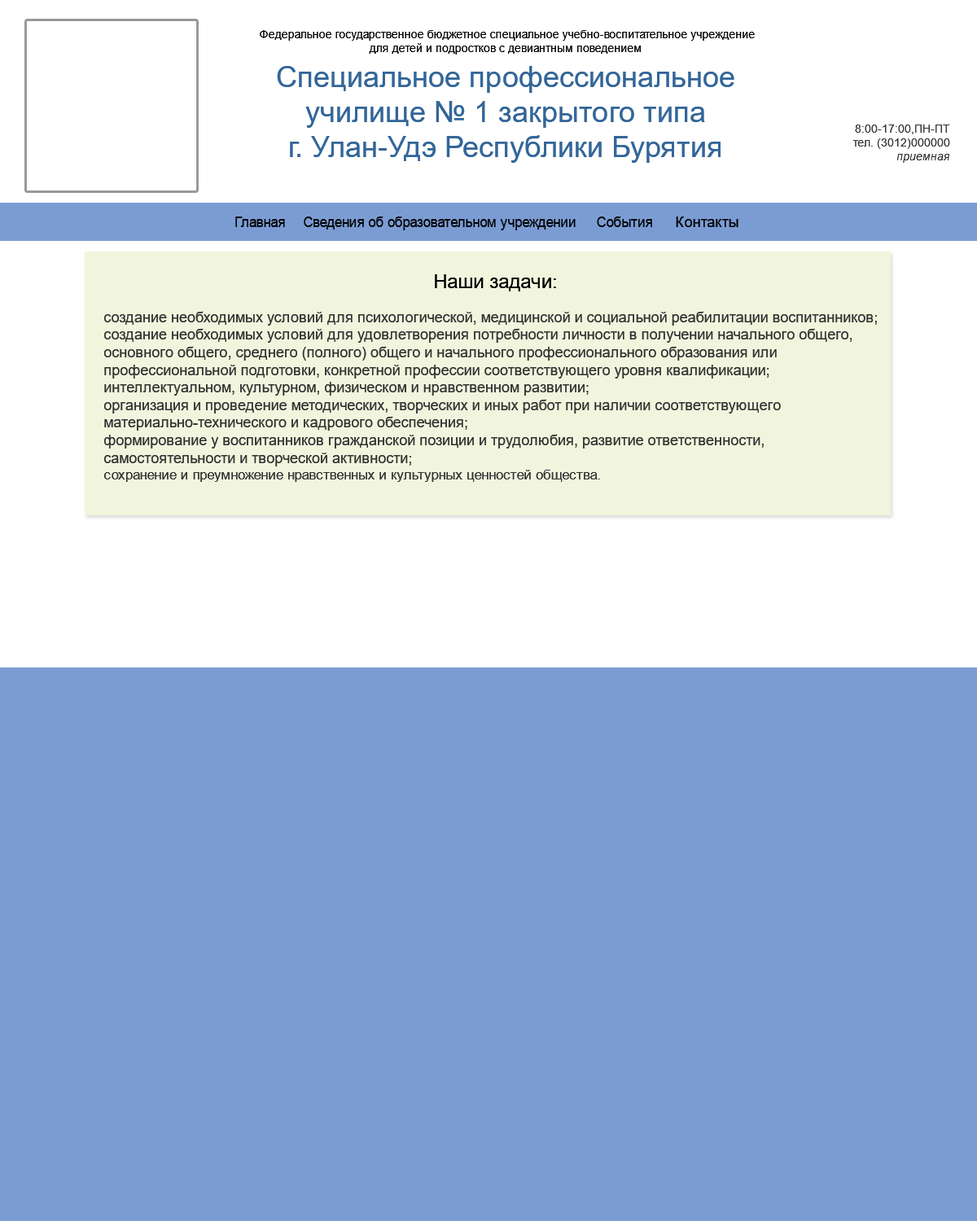
<style>
.page{position:relative;width:977px;height:1221px;background:#7b9cd3}
.page>*{position:absolute;margin:0}
.t1{font:11.4px "ArialMT";color:#000000}
.t2{font:29.3px "ArialMT";color:#336699}
.t3{font:11.4px "ArialMT";color:#333333}
.t4{font:11.4px "Arial-ItalicMT";color:#333333}
.t5{font:14.7px "ArialMT";color:#000000;scale:0.93 1}
.t6{font:14.7px "ArialMT";color:#000000}
.t7{font:14.7px "ArialMT";color:#333333}
.t8{font:13.6px "ArialMT";color:#000000}
.t9{font:19.5px "ArialMT";color:#000000}
.t10{font:13.6px "ArialMT";color:#333333}
</style>
<div class="page">
<p class="t1" style="left:260px;top:30px;width:495px;height:25px;text-align:center">Федеральное государственное бюджетное специальное учебно-воспитательное учреждение для детей и подростков с девиантным поведением</p>
<p class="t2" style="left:277px;top:66px;width:457px;height:97px;text-align:center">Специальное профессиональное училище № 1 закрытого типа<br>г. Улан-Удэ Республики Бурятия</p>
<p class="t3" style="left:852px;top:125px;width:98px;height:38px;text-align:right">8:00-17:00,ПН-ПТ<br>тел. (3012)000000<br><span class="t4">приемная</span></p>
<p class="t5" style="left:235px;top:217px;width:50px;height:10px">Главная</p>
<p class="t5" style="left:304px;top:217px;width:271px;height:13px">Сведения об образовательном учреждении</p>
<p class="t5" style="left:597px;top:217px;width:55px;height:10px">События</p>
<p class="t6" style="left:676px;top:217px;width:62px;height:10px">Контакты</p>
<p class="t7" style="left:104px;top:274px;width:773px;height:208px;text-align:center"><span class="t8">  </span><span class="t9">Наши задачи:<br><br></span>создание необходимых условий для психологической, медицинской и социальной реабилитации воспитанников;<br>создание необходимых условий для удовлетворения потребности личности в получении начального общего, основного общего, среднего (полного) общего и начального профессионального образования или профессиональной подготовки, конкретной профессии соответствующего уровня квалификации; интеллектуальном, культурном, физическом и нравственном развитии;<br>организация и проведение методических, творческих и иных работ при наличии соответствующего материально-технического и кадрового обеспечения; <br>формирование у воспитанников гражданской позиции и трудолюбия, развитие ответственности, самостоятельности и творческой активности; <br><span class="t10">сохранение и преумножение нравственных и культурных ценностей общества.</span></p>
</div>
